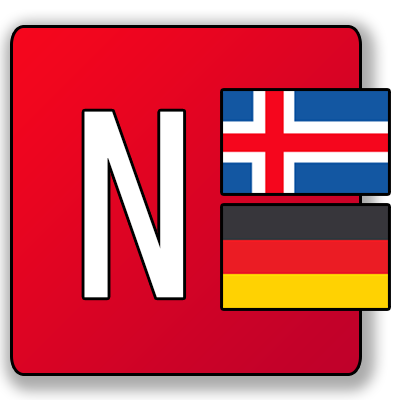
<style>
.page{position:relative;width:400px;height:400px}
.page>*{position:absolute;margin:0}
.t1{font:241.5px "MS-Gothic";color:#ffffff}
</style>
<div class="page">
<p class="t1" style="left:84px;top:111px;width:100px;height:187px">N</p>
</div>
